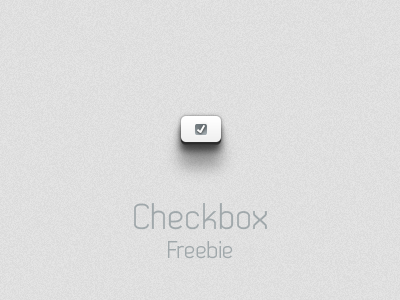
<style>
.page{position:relative;width:400px;height:300px}
.page>*{position:absolute;margin:0}
.t1{font:36px "Dekar";color:#a0a8ab}
.t2{font:24px "Dekar";color:#a0a8ab}
</style>
<div class="page">
<p class="t1" style="left:134px;top:203px;width:133px;height:56px;text-align:center">Checkbox<br><span class="t2">Freebie</span></p>
</div>
